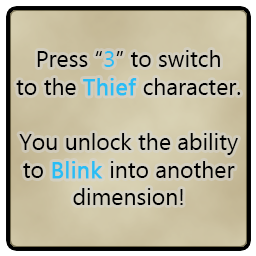
<style>
.page{position:relative;width:256px;height:256px}
.page>*{position:absolute;margin:0}
.t1{font:23px "Ebrima";color:#000000}
.t2{font:23px "Ebrima";color:#29bdf4}
.t3{font:23px "Ebrima";color:#29bdf4;font-weight:bold}
</style>
<div class="page">
<p class="t1" style="left:16px;top:50px;width:225px;height:155px;text-align:center">Press “<span class="t2">3</span>” to switch<br>to the <span class="t3">Thief </span>character.<br><br>You unlock the ability<br>to <span class="t3">Blink </span>into another<br>dimension!</p>
</div>
